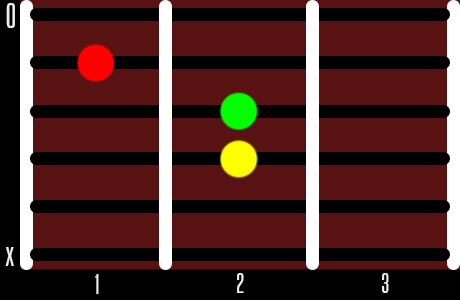
<style>
.page{position:relative;width:460px;height:300px;background:#591212}
.page>*{position:absolute;margin:0}
.t1{font:30px "Steelfish-Regular";color:#eeeeee}
.t2{font:24px "Steelfish-Regular";color:#eeeeee}
</style>
<div class="page">
<p class="t1" style="left:6px;top:3px;width:9px;height:25px">0</p>
<p class="t1" style="left:5px;top:247px;width:9px;height:19px">x</p>
<p class="t2" style="left:95px;top:274px;width:4px;height:20px">1</p>
<p class="t2" style="left:237px;top:273px;width:7px;height:20px">2</p>
<p class="t2" style="left:382px;top:273px;width:7px;height:20px">3</p>
</div>
